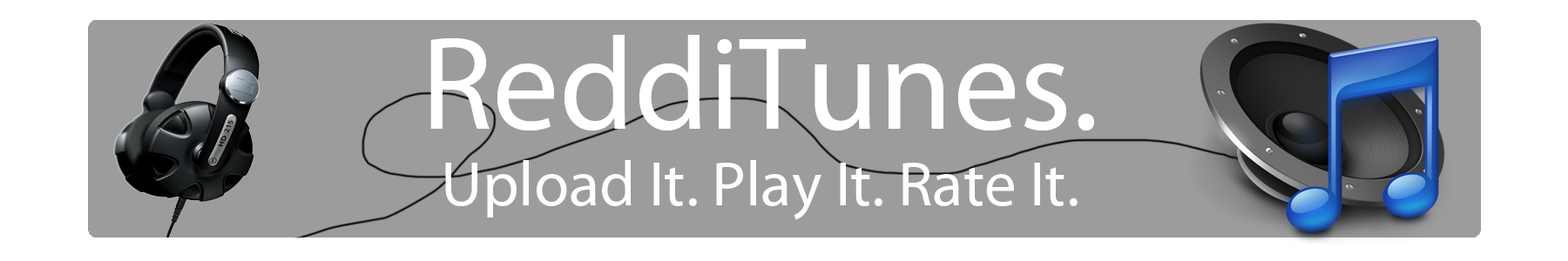
<style>
.page{position:relative;width:1568px;height:261px;background:#9c9c9c}
.page>*{position:absolute;margin:0}
.t1{font:63.7px "MyriadPro-Regular";color:#ffffff}
.t2{font:132.8px "MyriadPro-Regular";color:#ffffff}
</style>
<div class="page">
<p class="t1" style="left:430px;top:35px;width:664px;height:185px;text-align:center"><span class="t2">ReddiTunes.<br></span>Upload It. Play It. Rate It.</p>
</div>
